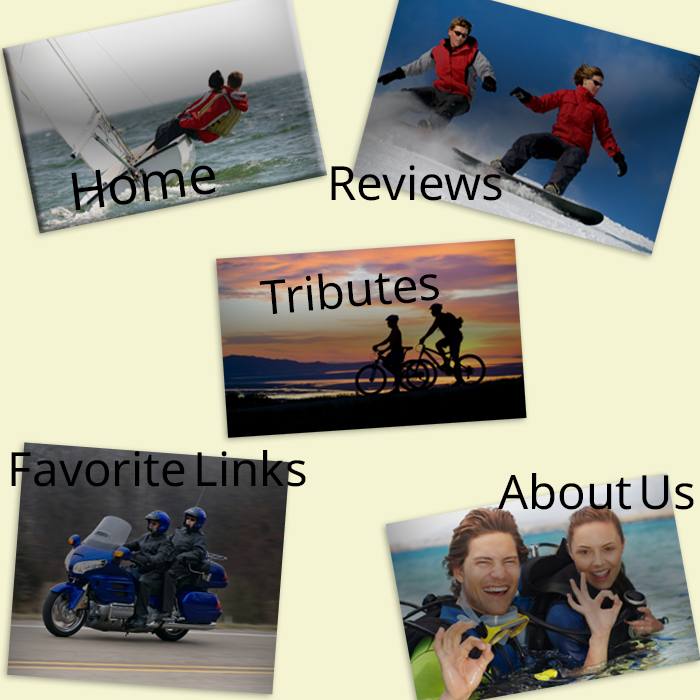
<style>
.page{position:relative;width:700px;height:700px;background:#f4f4d3}
.page>*{position:absolute;margin:0}
.t1{font:52.6px "SansSerifCollection";color:#000000}
.t2{font:47.3px "SansSerifCollection";color:#000000}
</style>
<div class="page">
<p class="t1" style="left:71px;top:165px;width:145px;height:46px;rotate:-7deg">Home</p>
<p class="t2" style="left:331px;top:165px;width:171px;height:36px">Reviews</p>
<p class="t2" style="left:259px;top:273px;width:180px;height:41px;rotate:-5deg">Tributes</p>
<p class="t2" style="left:11px;top:450px;width:295px;height:37px">Favorite Links</p>
<p class="t2" style="left:498px;top:473px;width:196px;height:37px">About Us</p>
</div>
